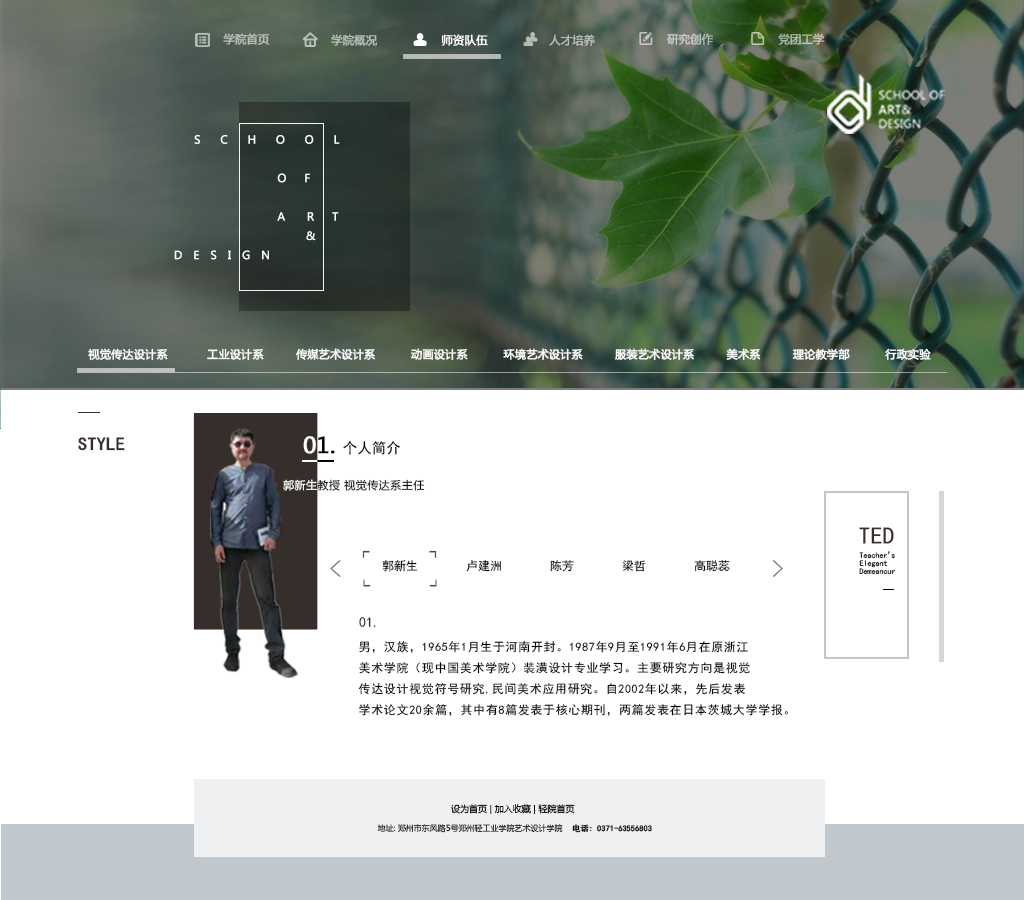
<style>
.page{position:relative;width:1024px;height:900px;background:#ffffff}
.page>*{position:absolute;margin:0}
.t1{font:11px "MicrosoftYaHei";color:#ffffff;font-weight:bold}
.t2{font:11px "MicrosoftYaHei";letter-spacing:0.2em;color:#ffffff;font-weight:bold}
.t3{font:18px "SimHei";color:#362e2b;font-weight:bold}
.t4{font:14.5px "SimHei";color:#000000}
.t5{font:10.9px "MicrosoftYaHei";letter-spacing:0.05em;color:#000000}
.t6{font:24px "SimHei";color:#362e2b}
.t7{font:12px "SimHei";color:#4c4c4c}
.t8{font:8px/8px "SimHei";color:#362e2b}
.t9{font:8px "SimHei";color:#362e2b}
.t10{font:24px "SimHei";color:#737373}
.t11{font:12px "SimHei";color:#000000}
.t12{font:14px "SimHei";color:#362e2b}
.t13{font:12px "SimHei";letter-spacing:0.05em;color:#000000}
.t14{font:8px/10px "MicrosoftYaHei";color:#000000}
.t15{font:9px/10px "MicrosoftYaHei";color:#000000}
.t16{font:8px "SimHei";color:#000000;font-weight:bold}
</style>
<div class="page">
<p class="t1" style="left:174px;top:135px;width:166px;height:125px"><span class="t2">              S   C   H   O   O   L <br></span><br>                                              O     F  <br>                            <br>                                              A      R     T       <br>                                                      &amp;    <br>                 D   E   S   I   G   N</p>
<p class="t1" style="left:88px;top:348px;width:843px;height:12px">视觉传达设计系           工业设计系         传媒艺术设计系          动画设计系          环境艺术设计系         服装艺术设计系         美术系         理论教学部          行政实验</p>
<p class="t3" style="left:78px;top:437px;width:47px;height:14px">STYLE</p>
<p class="t4" style="left:343px;top:441px;width:57px;height:14px">个人简介</p>
<p class="t5" style="left:283px;top:479px;width:142px;height:12px">郭新生教授 视觉传达系主任</p>
<p class="t6" style="left:859px;top:527px;width:35px;height:17px">TED</p>
<p class="t7" style="left:362px;top:550px;width:75px;height:8px">┍          ┑</p>
<p class="t8" style="left:859px;top:551px;width:36px;height:24px">Teacher’ <br>Elegant <br>Demeanour</p>
<p class="t9" style="left:891px;top:554px;width:4px;height:5px">s</p>
<p class="t10" style="left:330px;top:560px;width:11px;height:17px">&lt;</p>
<p class="t11" style="left:382px;top:560px;width:348px;height:12px">郭新生        卢建洲        陈芳        梁哲        高聪蕊</p>
<p class="t10" style="left:772px;top:560px;width:11px;height:17px">&gt;</p>
<p class="t7" style="left:363px;top:579px;width:74px;height:8px">┕          ┙</p>
<p class="t12" style="left:359px;top:617px;width:17px;height:10px">01.</p>
<p class="t13" style="left:358px;top:641px;width:430px;height:75px">男，汉族，1965年1月生于河南开封。1987年9月至1991年6月在原浙江<br>美术学院（现中国美术学院）装潢设计专业学习。主要研究方向是视觉<br>传达设计视觉符号研究,民间美术应用研究。自2002年以来，先后发表<br>学术论文20余篇，其中有8篇发表于核心期刊，两篇发表在日本茨城大学学报。</p>
<p class="t14" style="left:377px;top:804px;width:275px;height:29px"><span class="t15">设为首页 | 加入收藏 | 轻院首页 <br></span><br>地址: 郑州市东风路5号郑州轻工业学院艺术设计学院   <span class="t16"> 电话: 0371-63556803</span></p>
</div>
